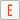
<style>
.page{position:relative;width:20px;height:20px}
.page>*{position:absolute;margin:0}
.t1{font:18px "Calibri";color:#d05220;scale:0.69 1}
</style>
<div class="page">
<p class="t1" style="left:7px;top:4px;width:6px;height:13px">E</p>
</div>
